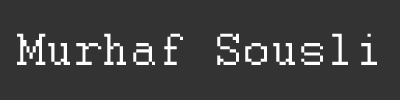
<style>
.page{position:relative;width:400px;height:100px;background:#333333}
.page>*{position:absolute;margin:0}
.t1{font:50px "Courier";color:#fffefe}
</style>
<div class="page">
<p class="t1" style="left:17px;top:33px;width:360px;height:32px">Murhaf Sousli</p>
</div>
